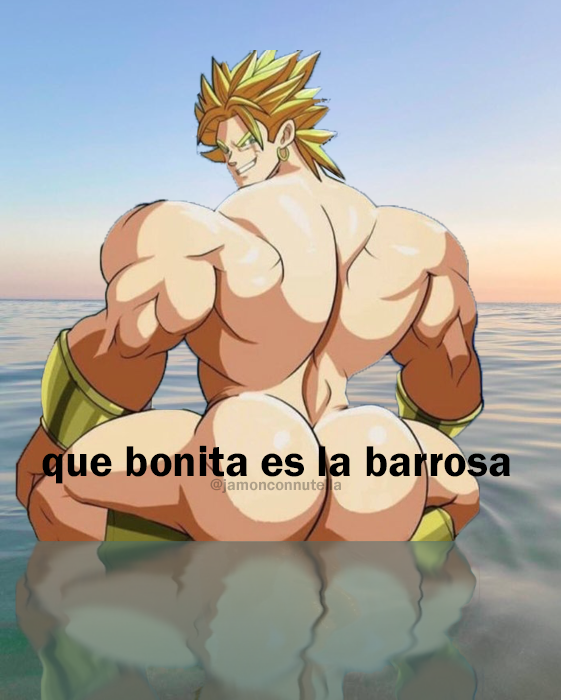
<style>
.page{position:relative;width:561px;height:700px}
.page>*{position:absolute;margin:0}
.t1{font:44.7px "FranklinGothic-Demi";color:#000000}
.t2{font:16.2px "FranklinGothic-Demi";color:#ae9e85}
</style>
<div class="page">
<p class="t1" style="left:42px;top:445px;width:468px;height:39px">que bonita es la barrosa</p>
<p class="t2" style="left:210px;top:478px;width:131px;height:15px">@jamonconnutella</p>
</div>
